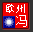
<style>
.page{position:relative;width:33px;height:32px;background:#f20000}
.page>*{position:absolute;margin:0}
.t1{font:10.4px "SimSun";color:#ffffff}
.t2{font:11.7px "SimSun";color:#ffffff}
</style>
<div class="page">
<p class="t1" style="left:6px;top:4px;width:19px;height:9px">欧州</p>
<p class="t2" style="left:16px;top:15px;width:11px;height:12px">冯</p>
</div>
